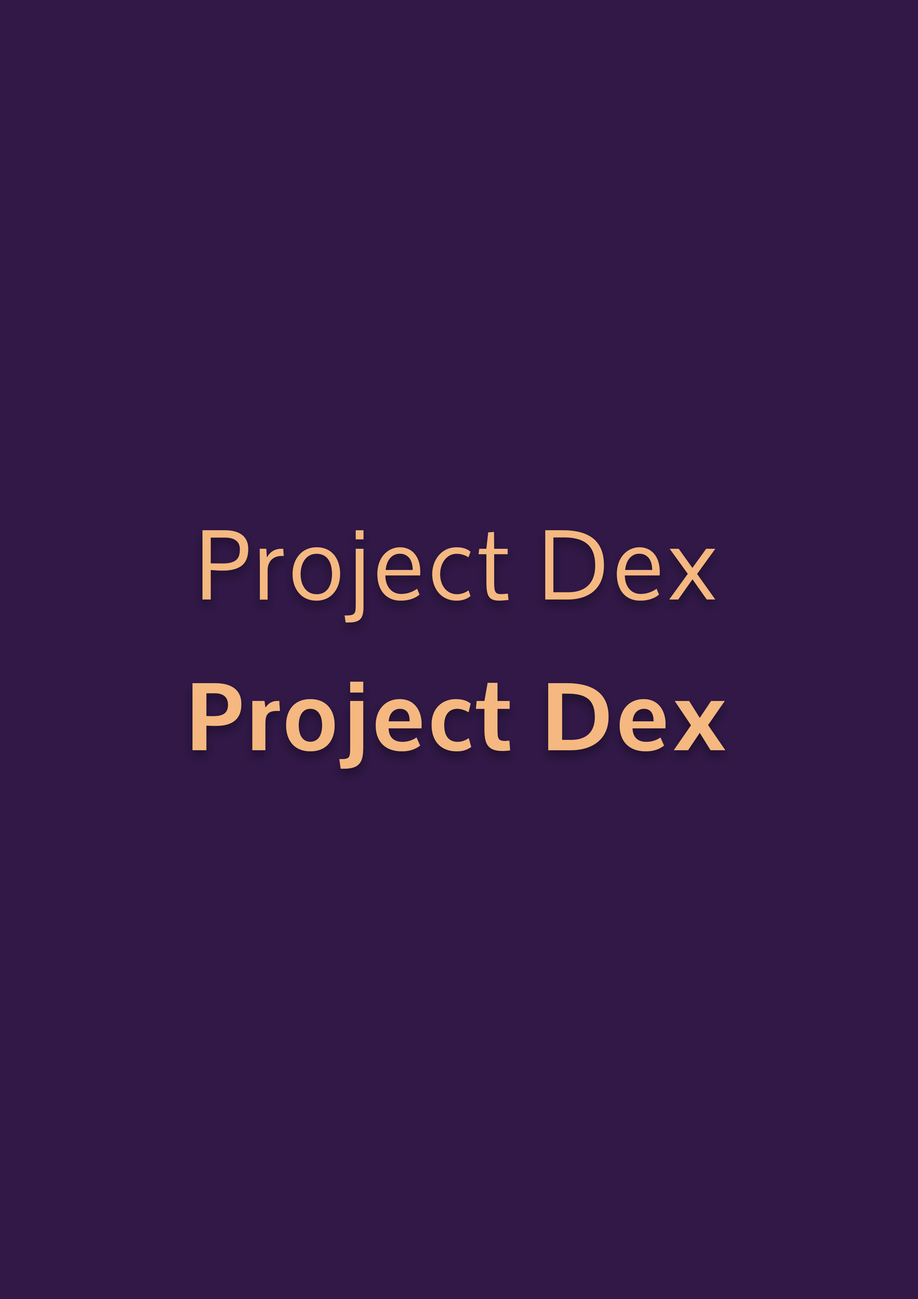
<style>
.page{position:relative;width:918px;height:1299px;background:#311847}
.page>*{position:absolute;margin:0}
.t1{font:94.8px "Oxygen";letter-spacing:0.05em;color:#f5b880}
.t2{font:94.8px "Oxygen-Bold";letter-spacing:0.05em;color:#f5b880}
</style>
<div class="page">
<p class="t1" style="left:203px;top:530px;width:513px;height:93px">Project Dex</p>
<p class="t2" style="left:193px;top:681px;width:533px;height:88px">Project Dex</p>
</div>
